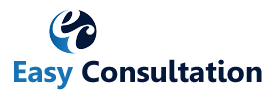
<style>
.page{position:relative;width:270px;height:98px;background:#ffffff}
.page>*{position:absolute;margin:0}
.t1{font:30px "Gisha-Bold";color:#03183b}
.t2{font:30px "Gisha-Bold";color:#1873b4}
</style>
<div class="page">
<p class="t1" style="left:14px;top:59px;width:248px;height:31px"><span class="t2">Easy </span>Consultation</p>
</div>
